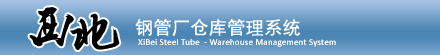
<style>
.page{position:relative;width:440px;height:55px}
.page>*{position:absolute;margin:0}
.t1{font:18px "SimHei";letter-spacing:0.025em;color:#ffffff}
.t2{font:9px "Calibri";letter-spacing:0.025em;color:#ffffff}
</style>
<div class="page">
<p class="t1" style="left:135px;top:19px;width:165px;height:17px">钢管厂仓库管理系统</p>
<p class="t2" style="left:138px;top:39px;width:198px;height:8px">XiBei Steel Tube  - Warehouse Management System</p>
</div>
